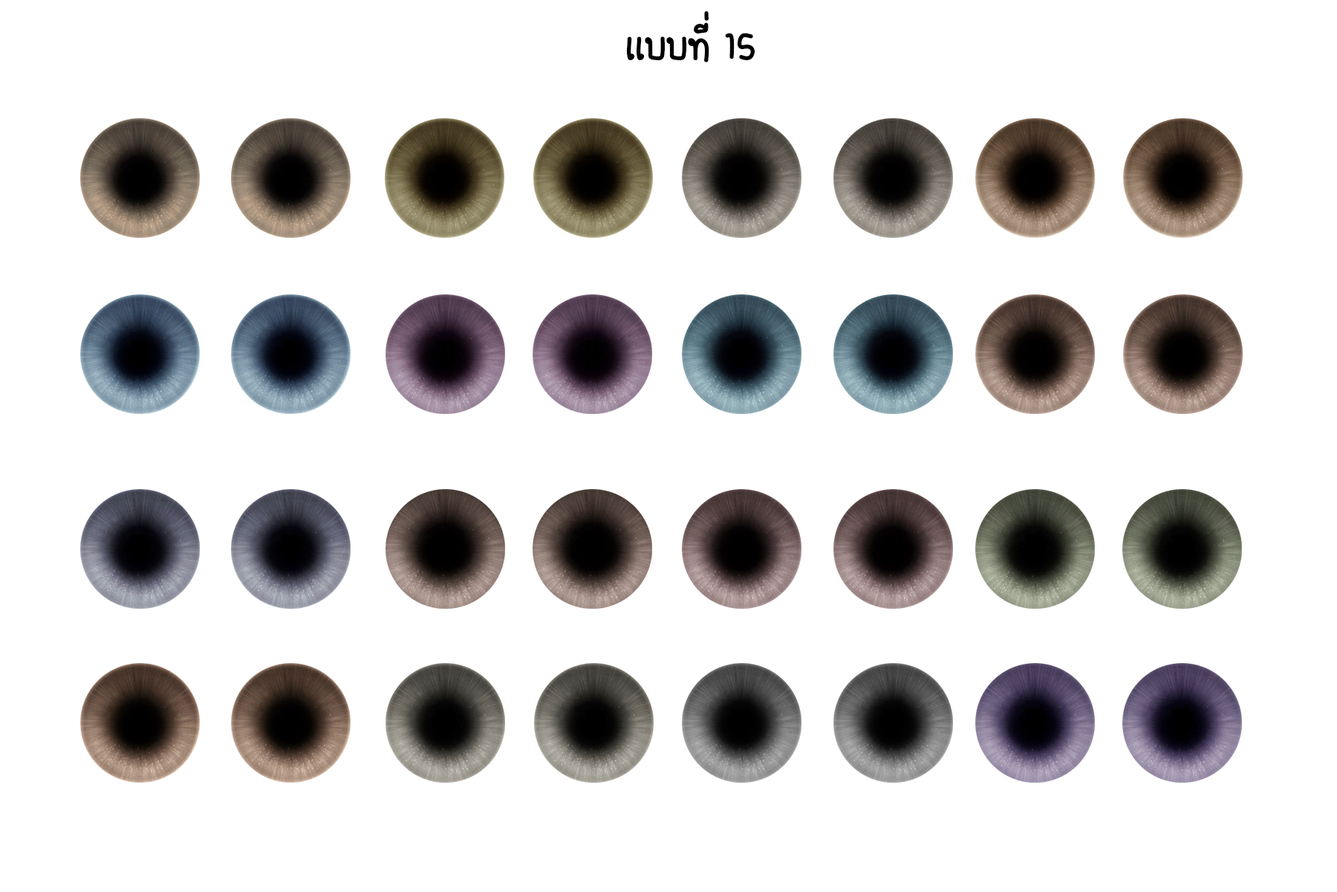
<style>
.page{position:relative;width:1337px;height:892px;background:#ffffff}
.page>*{position:absolute;margin:0}
.t1{font:55.7px "FCDaisyRegular";color:#000000}
</style>
<div class="page">
<p class="t1" style="left:626px;top:11px;width:129px;height:51px">เเบบที่ 15</p>
</div>
